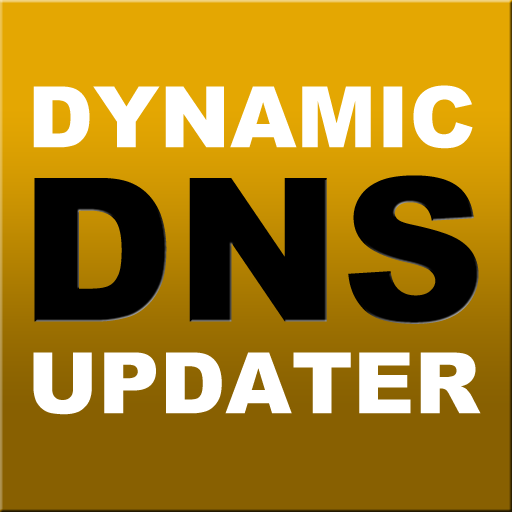
<style>
.page{position:relative;width:512px;height:512px;background:#886001}
.page>*{position:absolute;margin:0}
.t1{font:85px "Arial-Black";color:#ffffff}
.t2{font:200px "Arial-Black";color:#000000}
</style>
<div class="page">
<p class="t1" style="left:33px;top:85px;width:440px;height:64px">DYNAMIC</p>
<p class="t2" style="left:34px;top:175px;width:445px;height:149px">DNS</p>
<p class="t1" style="left:33px;top:352px;width:448px;height:63px">UPDATER</p>
</div>
